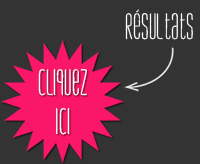
<style>
.page{position:relative;width:200px;height:164px;background:#333333}
.page>*{position:absolute;margin:0}
.t1{font:32.1px "skinnymarker";color:#ffffff}
.t2{font:32px "skinnymarker";color:#ffffff}
</style>
<div class="page">
<p class="t1" style="left:125px;top:9px;width:68px;height:31px">Résultats</p>
<p class="t2" style="left:38px;top:69px;width:49px;height:66px;text-align:center">Cliquez<br>Ici</p>
</div>
